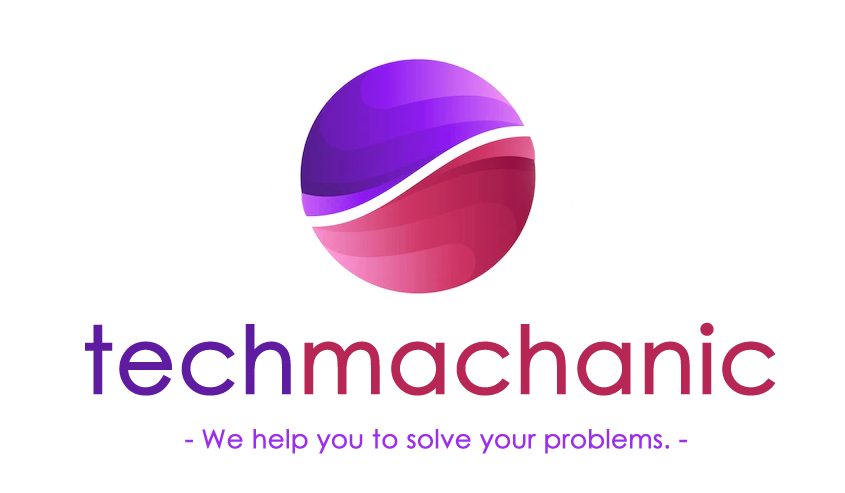
<style>
.page{position:relative;width:845px;height:493px;background:#ffffff}
.page>*{position:absolute;margin:0}
.t1{font:92.1px "CenturyGothic";color:#b72755;font-weight:bold}
.t2{font:92.1px "CenturyGothic";color:#5f1ca0;font-weight:bold}
.t3{font:25.4px "CenturyGothic";color:#9c2fee;font-weight:bold}
</style>
<div class="page">
<p class="t1" style="left:85px;top:322px;width:691px;height:74px"><span class="t2">tech</span>machanic</p>
<p class="t3" style="left:185px;top:429px;width:502px;height:25px">- We help you to solve your problems. -</p>
</div>
